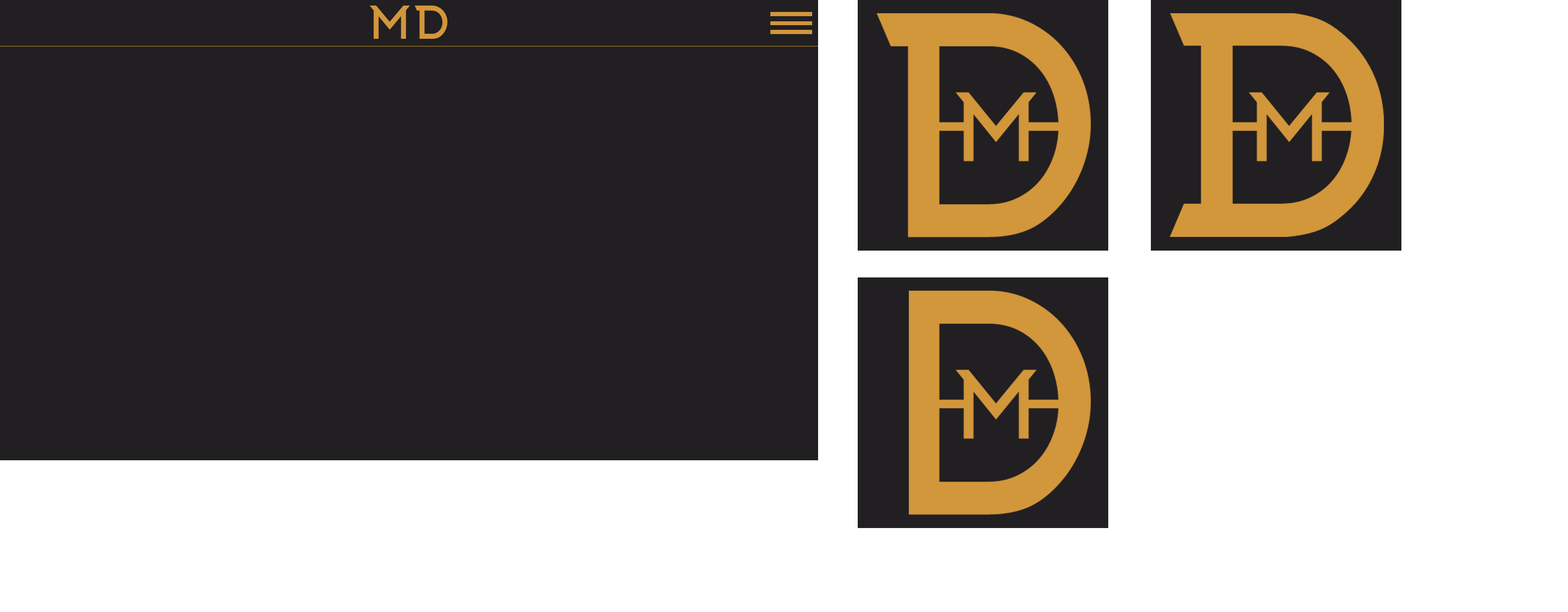
<style>
.page{position:relative;width:1568px;height:612px;background:#211f21}
.page>*{position:absolute;margin:0}
.t1{font:44.4px "Arkhip";letter-spacing:0.03em;color:#d2963b}
</style>
<div class="page">
<p class="t1" style="left:369px;top:6px;width:78px;height:33px">MD</p>
</div>
